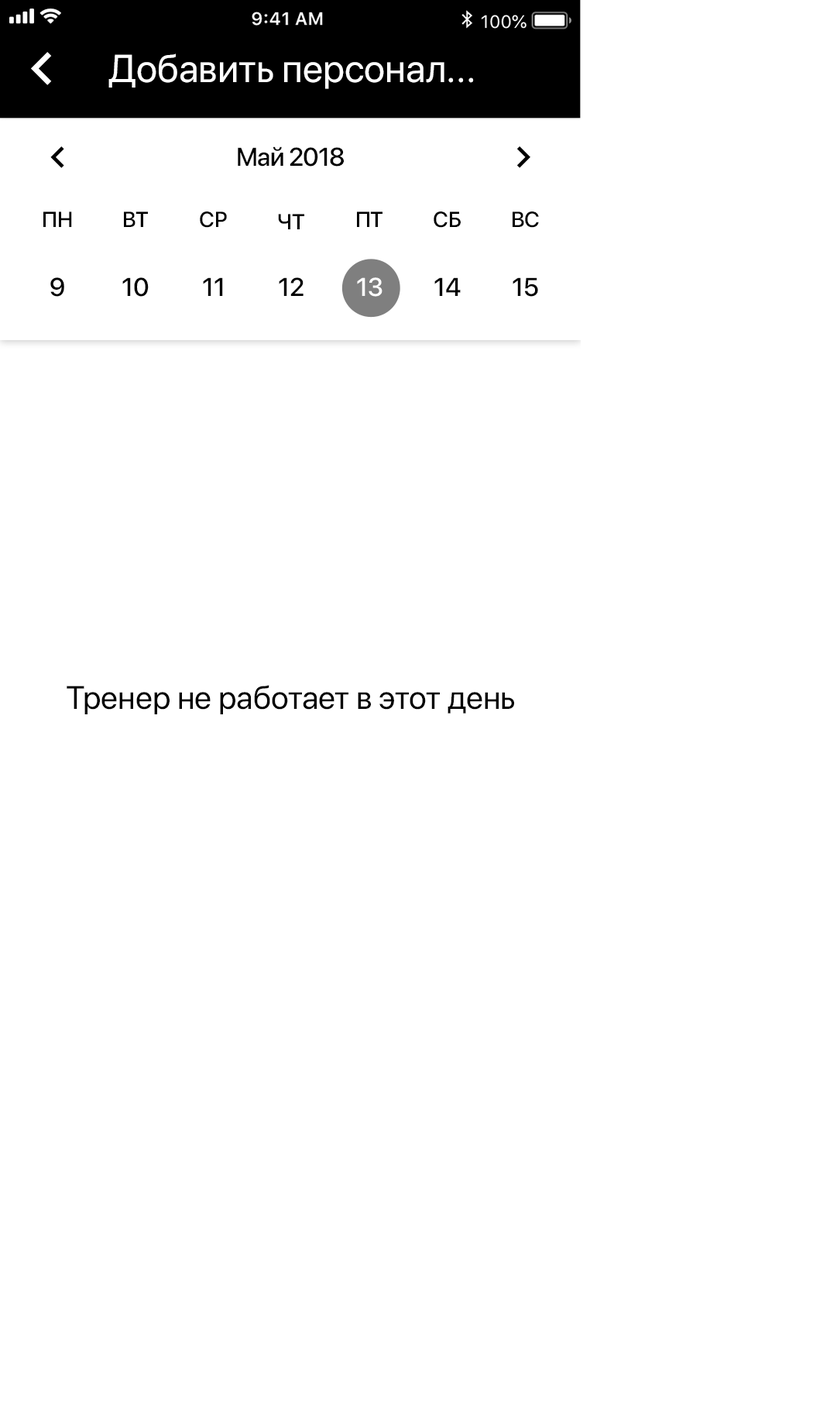
<style>
.page{position:relative;width:837px;height:1424px;background:#ffffff}
.page>*{position:absolute;margin:0}
.t1{font:38.7px "SFProDisplay-Regular";color:#ffffff}
.t2{font:25.6px "SFProDisplay-Medium";letter-spacing:-0.023em;color:#000000}
.t3{font:21.7px "SFProDisplay-Medium";color:#000000}
.t4{font:25.6px "SFProDisplay-Medium";color:#000000}
.t5{font:25.6px "SFProDisplay-Medium";color:#ffffff}
.t6{font:32.5px "SFProDisplay-Regular";color:#000000}
</style>
<div class="page">
<p class="t1" style="left:108px;top:53px;width:366px;height:36px">Добавить персонал...</p>
<p class="t2" style="left:238px;top:146px;width:106px;height:21px">Май 2018</p>
<p class="t3" style="left:43px;top:211px;width:29px;height:16px">ПН</p>
<p class="t3" style="left:124px;top:211px;width:24px;height:16px">ВТ</p>
<p class="t3" style="left:200px;top:211px;width:27px;height:17px">СР</p>
<p class="t3" style="left:278px;top:214px;width:26px;height:15px">ЧТ</p>
<p class="t3" style="left:357px;top:211px;width:26px;height:16px">ПТ</p>
<p class="t3" style="left:434px;top:211px;width:27px;height:17px">СБ</p>
<p class="t3" style="left:513px;top:211px;width:26px;height:17px">ВС</p>
<p class="t4" style="left:50px;top:277px;width:14px;height:20px">9</p>
<p class="t4" style="left:122px;top:277px;width:27px;height:20px">10</p>
<p class="t4" style="left:203px;top:277px;width:20px;height:19px">11</p>
<p class="t4" style="left:279px;top:277px;width:25px;height:19px">12</p>
<p class="t5" style="left:357px;top:277px;width:26px;height:20px">13</p>
<p class="t4" style="left:435px;top:277px;width:26px;height:19px">14</p>
<p class="t4" style="left:513px;top:277px;width:25px;height:20px">15</p>
<p class="t6" style="left:67px;top:685px;width:447px;height:29px">Тренер не работает в этот день</p>
</div>
